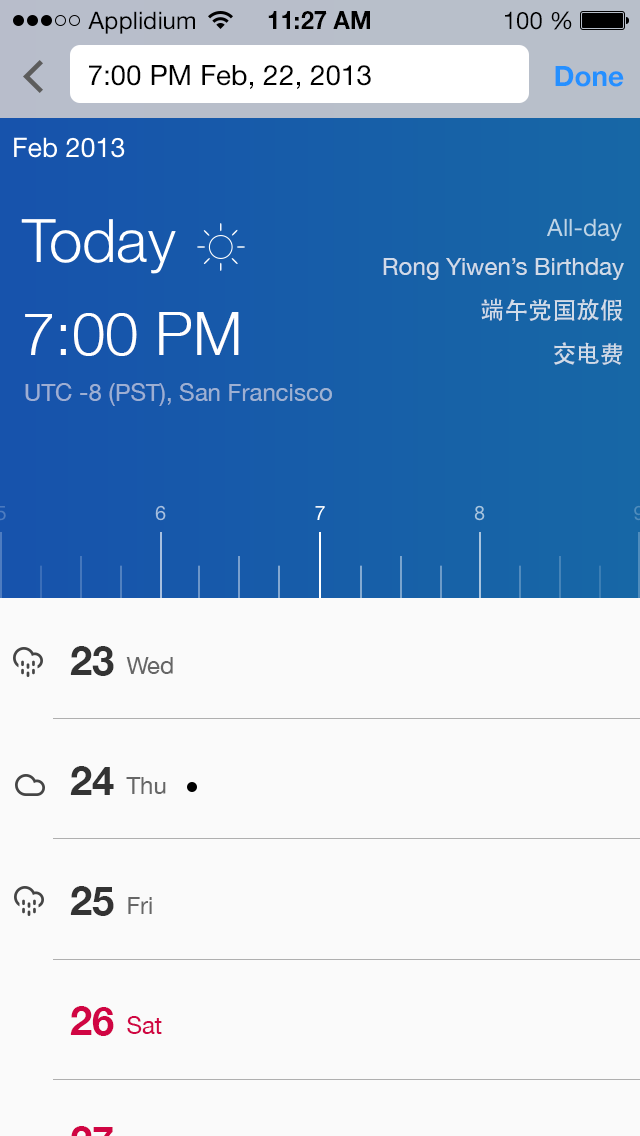
<style>
.page{position:relative;width:640px;height:1136px;background:#fafafa}
.page>*{position:absolute;margin:0}
.t1{font:24px "HelveticaNeueLTStd-Roman";color:#000000}
.t2{font:24px "HelveticaNeueLTStd-Bd";color:#000000}
.t3{font:28px "HelveticaNeue";color:#000000}
.t4{font:28px "HelveticaNeue-Bold";color:#2691ff}
.t5{font:27px "HelveticaNeue";color:#ffffff}
.t6{font:60px "HelveticaNeue-Light";color:#ffffff}
.t7{font:24px "HelveticaNeue";color:#bed4e6}
.t8{font:24px/44px "HelveticaNeue";color:#d1dbe8}
.t9{font:24px/44px "AdobeHeitiStd-Regular";color:#d1dbe8}
.t10{font:24px "HelveticaNeue";color:#9db0d3}
</style>
<div class="page">
<p class="t1" style="left:88px;top:11px;width:107px;height:23px">Applidium</p>
<p class="t2" style="left:268px;top:11px;width:102px;height:18px">11:27 AM</p>
<p class="t1" style="left:505px;top:11px;width:67px;height:19px">100 %</p>
<p class="t3" style="left:89px;top:65px;width:282px;height:24px">7:00 PM Feb, 22, 2013</p>
<p class="t4" style="left:555px;top:66px;width:69px;height:21px">Done</p>
<p class="t5" style="left:14px;top:137px;width:111px;height:21px">Feb 2013</p>
<p class="t6" style="left:21px;top:219px;width:155px;height:55px">Today</p>
<p class="t7" style="left:547px;top:218px;width:75px;height:23px">All-day</p>
<p class="t8" style="left:383px;top:258px;width:241px;height:107px;text-align:right">Rong Yiwen’s Birthday<br><span class="t9">端午党国放假<br>交电费</span></p>
<p class="t6" style="left:25px;top:312px;width:214px;height:44px">7:00 PM</p>
<p class="t10" style="left:25px;top:383px;width:307px;height:23px">UTC -8 (PST), San Francisco</p>
</div>
